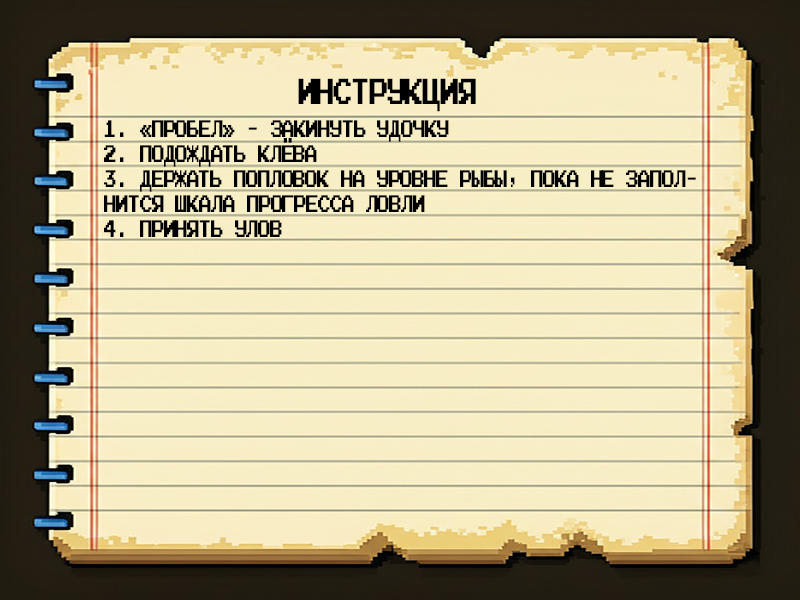
<style>
.page{position:relative;width:800px;height:600px}
.page>*{position:absolute;margin:0}
.t1{font:36px "JoystixMonospace-Regular";letter-spacing:-0.1em;color:#000000;scale:0.68 1}
.t2{font:24px/25px "JoystixMonospace-Regular";letter-spacing:-0.1em;color:#000000;scale:0.68 1}
</style>
<div class="page">
<p class="t1" style="left:298px;top:78px;width:178px;height:34px">Инструкция</p>
<p class="t2" style="left:104px;top:120px;width:592px;height:117px">1. «пробел» - закинуть удочку<br>2. Подождать клёва<br>3. держать попловок на уровне рыбы, пока не запол-<br>нится шкала прогресса ловли<br>4. принять улов</p>
</div>
